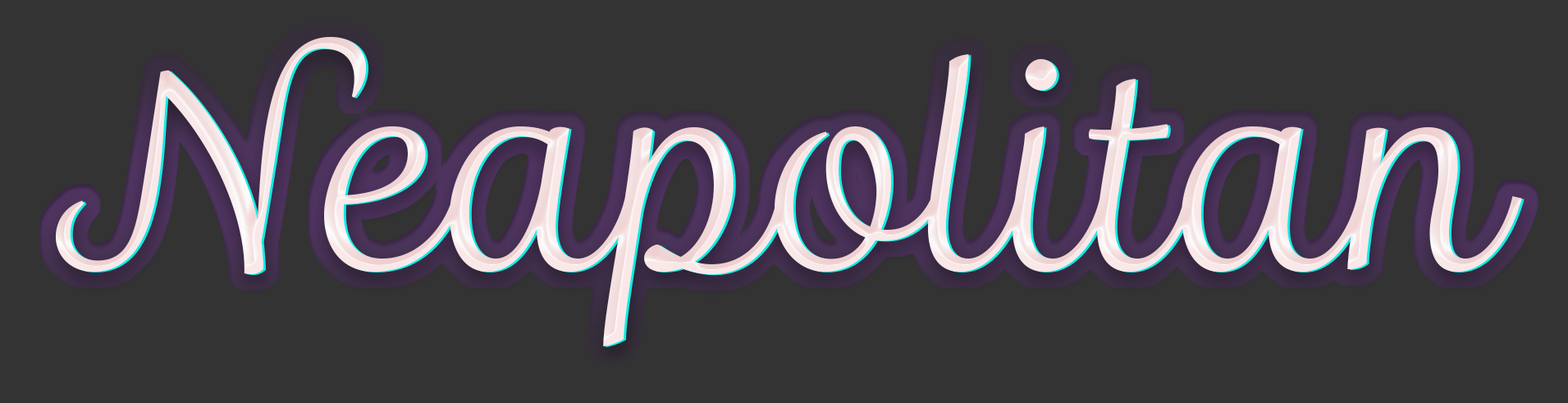
<style>
.page{position:relative;width:1568px;height:403px;background:#333333}
.page>*{position:absolute;margin:0}
.t1{font:278.6px "MadreScript";color:#f9e8e8}
</style>
<div class="page">
<p class="t1" style="left:55px;top:37px;width:1467px;height:309px">Neapolitan</p>
</div>
